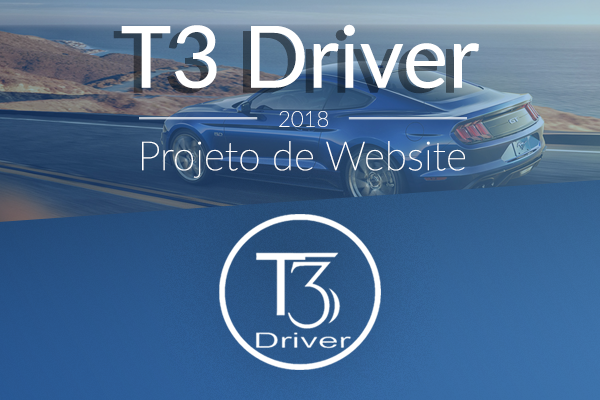
<style>
.page{position:relative;width:600px;height:400px}
.page>*{position:absolute;margin:0}
.t1{font:85.9px "Lato-Regular";color:#ffffff}
.t2{font:22.1px "Lato-Thin";color:#ffffff}
.t3{font:40.4px "Lato-Thin";color:#ffffff}
</style>
<div class="page">
<p class="t1" style="left:121px;top:24px;width:358px;height:65px">T3 Driver</p>
<p class="t2" style="left:279px;top:111px;width:49px;height:16px">2018</p>
<p class="t3" style="left:142px;top:141px;width:323px;height:37px">Projeto de Website</p>
</div>
